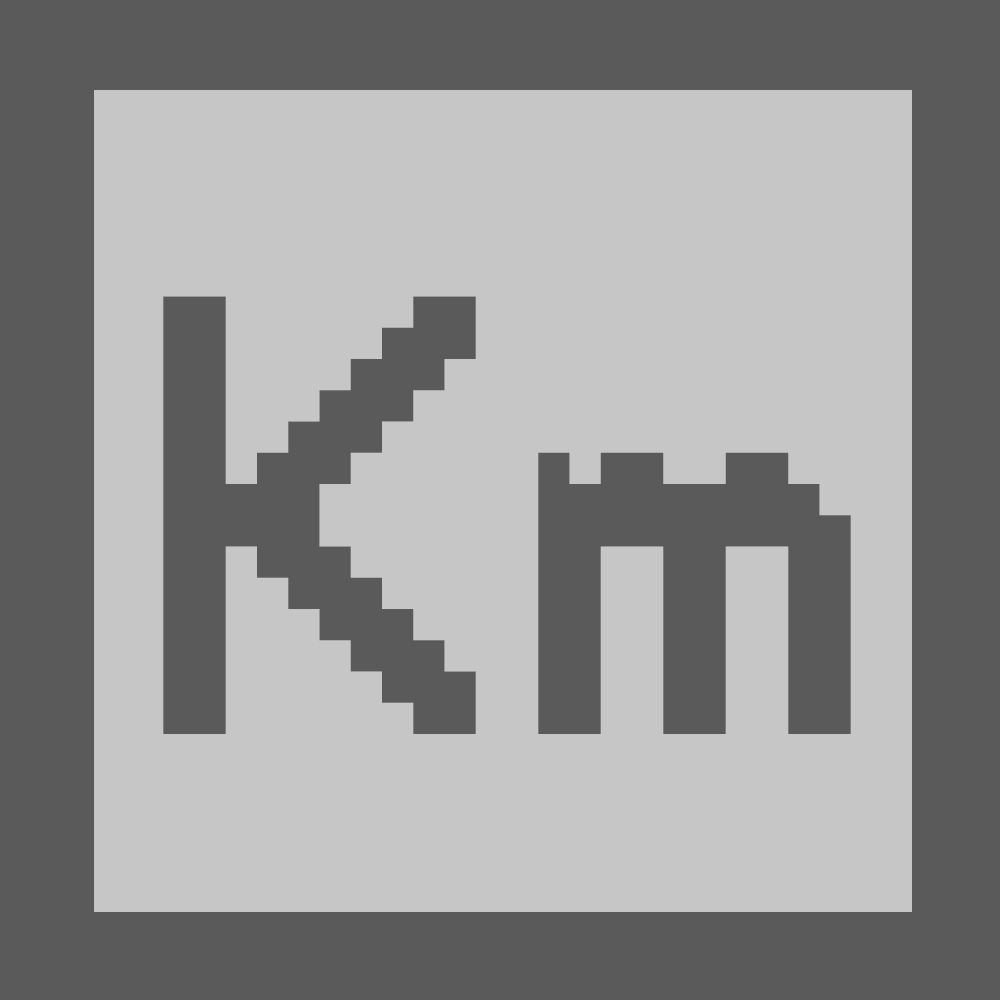
<style>
.page{position:relative;width:1000px;height:1000px;background:#c6c6c6}
.page>*{position:absolute;margin:0}
.t1{font:500px "Terminal";color:#5a5a5a}
</style>
<div class="page">
<p class="t1" style="left:163px;top:296px;width:688px;height:438px">Km</p>
</div>
